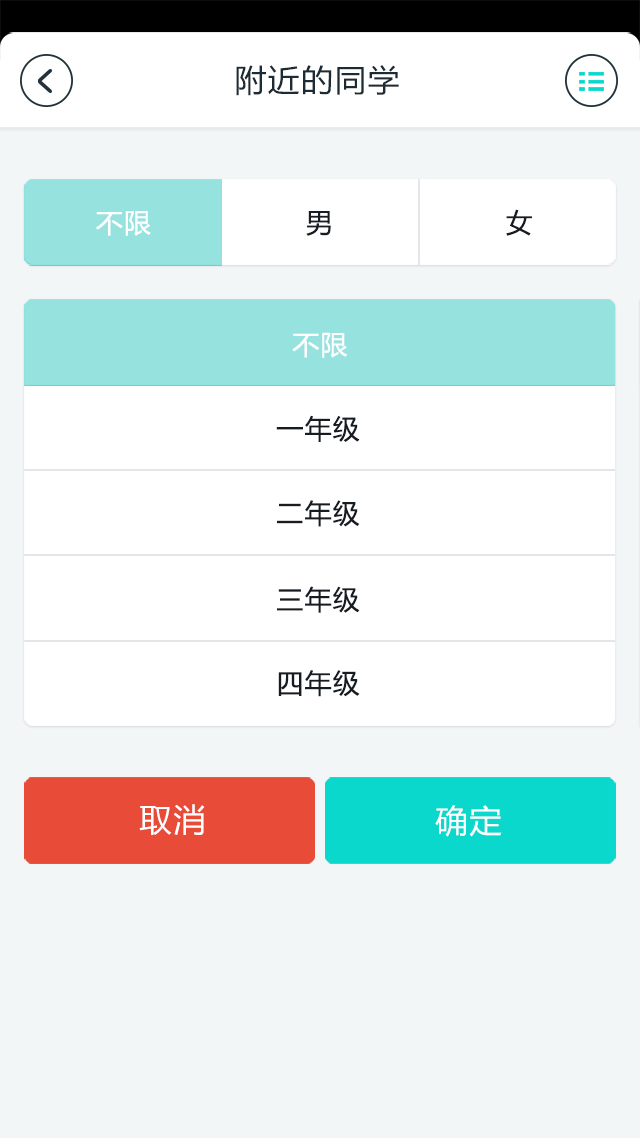
<style>
.page{position:relative;width:640px;height:1138px;background:#ffffff}
.page>*{position:absolute;margin:0}
.t1{font:31.1px "MicrosoftYaHei";letter-spacing:0.05em;color:#1d2b35}
.t2{font:26.7px "MicrosoftYaHei";letter-spacing:0.05em;color:#171b22}
.t3{font:26.7px "MicrosoftYaHei";letter-spacing:0.05em;color:#ffffff}
.t4{font:32px "MicrosoftYaHei";letter-spacing:0.05em;color:#ffffff}
</style>
<div class="page">
<p class="t1" style="left:236px;top:65px;width:163px;height:31px">附近的同学</p>
<p class="t2" style="left:506px;top:209px;width:26px;height:27px">女</p>
<p class="t3" style="left:96px;top:211px;width:55px;height:25px">不限</p>
<p class="t2" style="left:306px;top:211px;width:25px;height:25px">男</p>
<p class="t3" style="left:292px;top:332px;width:56px;height:26px">不限</p>
<p class="t2" style="left:276px;top:415px;width:84px;height:27px">一年级</p>
<p class="t2" style="left:277px;top:500px;width:83px;height:27px">二年级</p>
<p class="t2" style="left:277px;top:586px;width:83px;height:27px">三年级</p>
<p class="t2" style="left:278px;top:670px;width:82px;height:27px">四年级</p>
<p class="t4" style="left:139px;top:804px;width:66px;height:31px">取消</p>
<p class="t4" style="left:435px;top:805px;width:67px;height:32px">确定</p>
</div>
